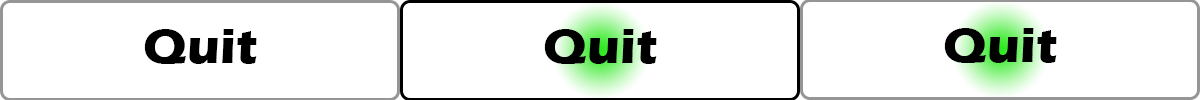
<style>
.page{position:relative;width:1200px;height:100px;background:#ffffff}
.page>*{position:absolute;margin:0}
.t1{font:50px "ErasITC-Bold";color:#010000}
.t2{font:50px "ErasITC-Bold";color:#000000}
</style>
<div class="page">
<p class="t1" style="left:144px;top:29px;width:113px;height:35px">Quit</p>
<p class="t2" style="left:544px;top:29px;width:113px;height:35px">Quit</p>
<p class="t2" style="left:944px;top:28px;width:113px;height:35px">Quit</p>
</div>
